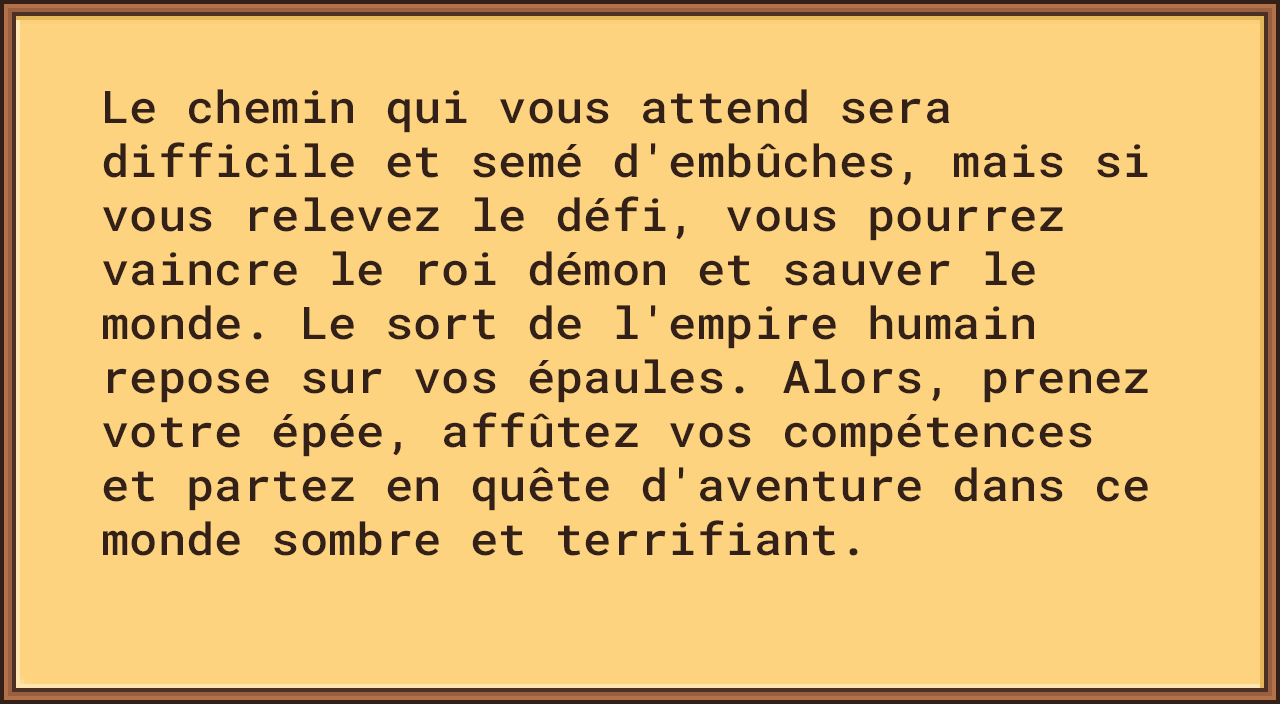
<style>
.page{position:relative;width:1280px;height:704px;background:#fed37f}
.page>*{position:absolute;margin:0}
.t1{font:45px "RobotoMono-Medium";color:#332018;scale:1.05 1}
</style>
<div class="page">
<p class="t1" style="left:103px;top:89px;width:1045px;height:467px">Le chemin qui vous attend sera difficile et semé d'embûches, mais si vous relevez le défi, vous pourrez vaincre le roi démon et sauver le monde. Le sort de l'empire humain repose sur vos épaules. Alors, prenez votre épée, affûtez vos compétences et partez en quête d'aventure dans ce monde sombre et terrifiant.</p>
</div>
